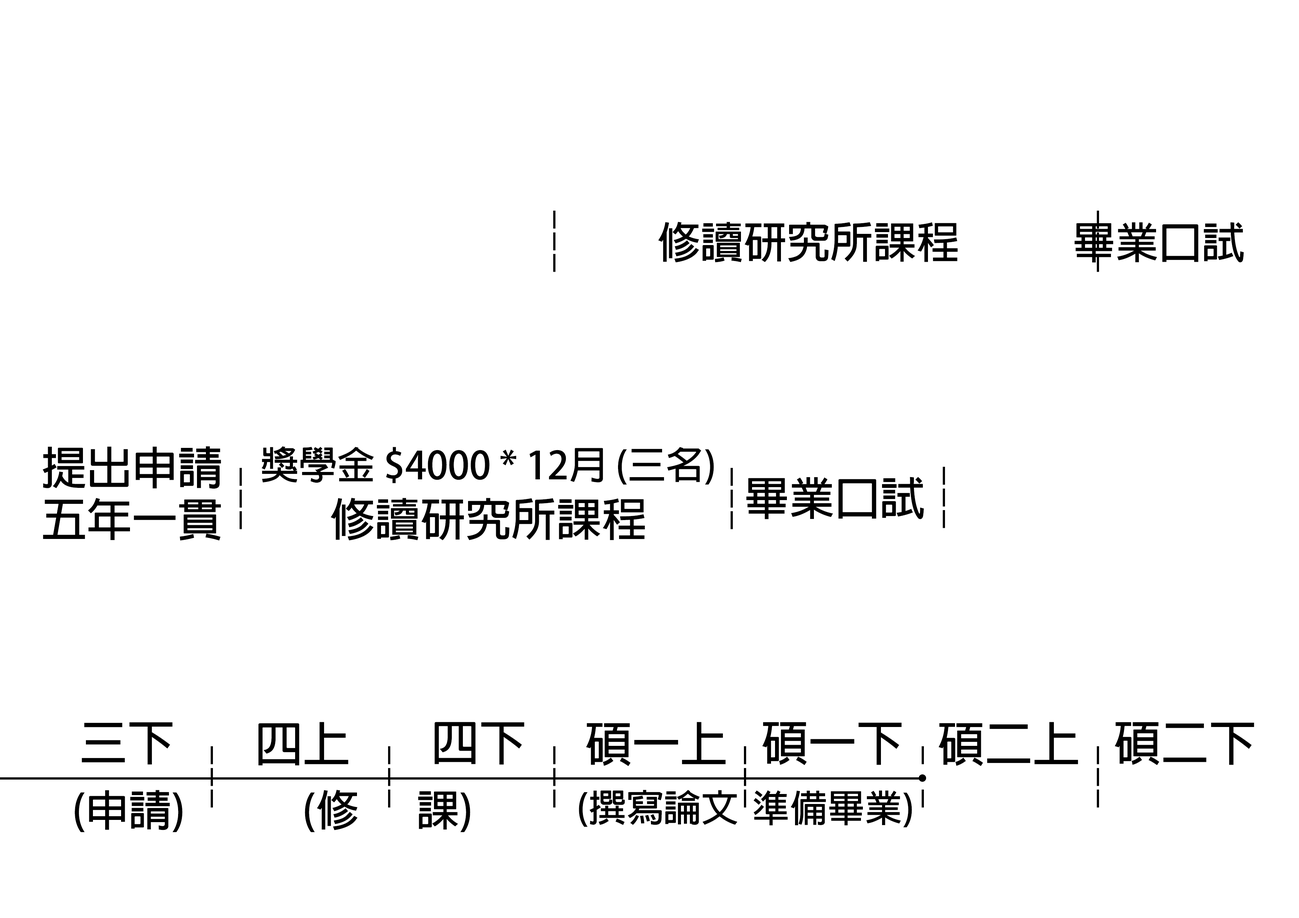
<style>
.page{position:relative;width:1299px;height:918px;background:#ffffff}
.page>*{position:absolute;margin:0}
.t1{font:43.2px "AdobeFanHeitiStd-Bold";color:#000000}
.t2{font:45.3px/51.8px "AdobeFanHeitiStd-Bold";color:#000000}
.t3{font:38.2px "AdobeFanHeitiStd-Bold";color:#000000}
.t4{font:45.3px "AdobeFanHeitiStd-Bold";color:#000000}
.t5{font:47.7px "AdobeFanHeitiStd-Bold";color:#000000}
.t6{font:42.9px "AdobeFanHeitiStd-Bold";color:#000000}
.t7{font:37.5px "AdobeFanHeitiStd-Bold";color:#000000}
</style>
<div class="page">
<p class="t1" style="left:658px;top:222px;width:299px;height:40px">修讀研究所課程</p>
<p class="t1" style="left:1074px;top:222px;width:170px;height:40px">畢業口試</p>
<p class="t2" style="left:43px;top:446px;width:178px;height:95px;text-align:center">提出申請<br>五年一貫</p>
<p class="t3" style="left:261px;top:446px;width:453px;height:39px">獎學金 $4000 * 12月 (三名)</p>
<p class="t4" style="left:746px;top:477px;width:178px;height:42px">畢業口試</p>
<p class="t4" style="left:331px;top:498px;width:314px;height:43px">修讀研究所課程</p>
<p class="t5" style="left:82px;top:722px;width:91px;height:43px">三下</p>
<p class="t5" style="left:258px;top:722px;width:90px;height:44px">四上</p>
<p class="t5" style="left:434px;top:722px;width:90px;height:43px">四下</p>
<p class="t5" style="left:586px;top:722px;width:140px;height:44px">碩一上</p>
<p class="t5" style="left:762px;top:722px;width:139px;height:43px">碩一下</p>
<p class="t5" style="left:938px;top:722px;width:140px;height:44px">碩二上</p>
<p class="t5" style="left:1114px;top:722px;width:140px;height:43px">碩二下</p>
<p class="t6" style="left:75px;top:790px;width:108px;height:42px">(申請)</p>
<p class="t6" style="left:305px;top:790px;width:165px;height:42px">(修      課)</p>
<p class="t7" style="left:579px;top:790px;width:158px;height:37px">(撰寫論文</p>
<p class="t7" style="left:753px;top:790px;width:159px;height:37px">準備畢業)</p>
</div>
